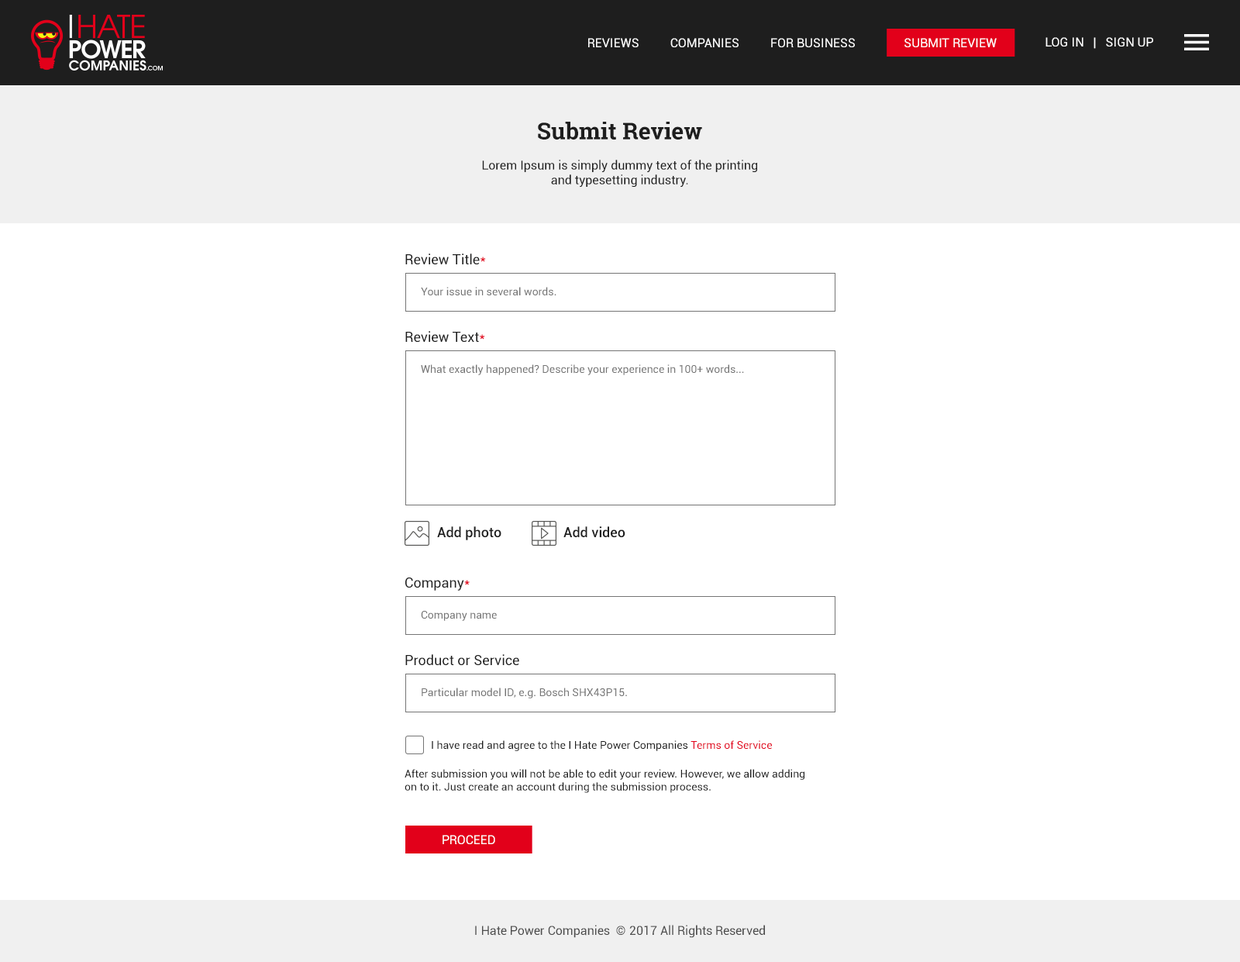
<style>
.page{position:relative;width:1240px;height:962px;background:#ffffff}
.page>*{position:absolute;margin:0}
.t1{font:12.4px "Roboto-Regular";color:#ffffff;text-transform:uppercase}
.t2{font:23.2px "RobotoSlab-Bold";color:#1e1e1e}
.t3{font:12.4px "Roboto-Regular";color:#1e1e1e}
.t4{font:13.9px "Roboto-Regular";color:#1e1e1e}
.t5{font:13.9px "Roboto-Regular";color:#e2001a}
.t6{font:10.8px "Roboto-Regular";color:#757575}
.t7{font:13.9px "Roboto-Medium";color:#1e1e1e}
.t8{font:10.8px "Roboto-Regular";color:#1e1e1e}
.t9{font:10.8px "Roboto-Regular";color:#e2001a}
.t10{font:12.4px "Roboto-Regular";color:#4d4d4d}
</style>
<div class="page">
<p class="t1" style="left:588px;top:38px;width:267px;height:9px">Reviews          Companies          For Business</p>
<p class="t1" style="left:904px;top:38px;width:93px;height:9px">submit review</p>
<p class="t1" style="left:1045px;top:37px;width:108px;height:12px">Log in   |   Sign up</p>
<p class="t2" style="left:538px;top:122px;width:164px;height:17px">Submit Review</p>
<p class="t3" style="left:482px;top:160px;width:275px;height:27px;text-align:center">Lorem Ipsum is simply dummy text of the printing<br>and typesetting industry.</p>
<p class="t4" style="left:405px;top:253px;width:81px;height:11px">Review Title<span class="t5">*</span></p>
<p class="t6" style="left:421px;top:287px;width:135px;height:9px">Your issue in several words.</p>
<p class="t4" style="left:405px;top:331px;width:80px;height:11px">Review Text<span class="t5">*</span></p>
<p class="t6" style="left:421px;top:364px;width:323px;height:11px">What exactly happened? Describe your experience in 100+ words...</p>
<p class="t7" style="left:437px;top:526px;width:64px;height:14px">Add photo</p>
<p class="t7" style="left:563px;top:526px;width:62px;height:11px">Add video</p>
<p class="t4" style="left:405px;top:577px;width:65px;height:14px">Company<span class="t5">*</span></p>
<p class="t6" style="left:421px;top:611px;width:76px;height:10px">Company name</p>
<p class="t4" style="left:405px;top:654px;width:114px;height:12px">Product or Service</p>
<p class="t6" style="left:422px;top:687px;width:205px;height:11px">Particular model ID, e.g. Bosch SHX43P15.</p>
<p class="t8" style="left:432px;top:740px;width:340px;height:11px">I have read and agree to the I Hate Power Companies <span class="t9">Terms of Service</span></p>
<p class="t8" style="left:405px;top:769px;width:399px;height:24px">After submission you will not be able to edit your review. However, we allow adding<br>on to it. Just create an account during the submission process.</p>
<p class="t1" style="left:442px;top:835px;width:53px;height:9px">PROCEED</p>
<p class="t10" style="left:475px;top:925px;width:290px;height:13px">I Hate Power Companies  © 2017 All Rights Reserved</p>
</div>
